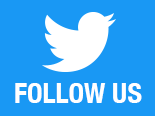
<style>
.page{position:relative;width:155px;height:116px;background:#1998f4}
.page>*{position:absolute;margin:0}
.t1{font:28px "HelveticaNeue-CondensedBold";color:#ffffff}
</style>
<div class="page">
<p class="t1" style="left:15px;top:83px;width:127px;height:20px">FOLLOW US</p>
</div>
